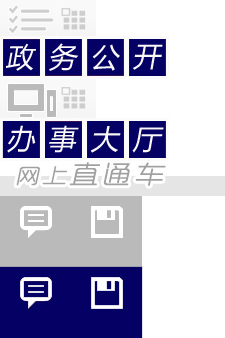
<style>
.page{position:relative;width:225px;height:338px;background:#ffffff}
.page>*{position:absolute;margin:0}
.t1{font:28px "MicrosoftYaHei";letter-spacing:0.08em;color:#faf8f6;font-style:italic}
</style>
<div class="page">
<p class="t1" style="left:6px;top:43px;width:30px;height:28px">政</p>
<p class="t1" style="left:49px;top:43px;width:30px;height:28px">务</p>
<p class="t1" style="left:92px;top:44px;width:28px;height:27px">公</p>
<p class="t1" style="left:133px;top:44px;width:30px;height:26px">开</p>
<p class="t1" style="left:7px;top:125px;width:29px;height:28px">办</p>
<p class="t1" style="left:49px;top:125px;width:30px;height:28px">事</p>
<p class="t1" style="left:90px;top:126px;width:31px;height:27px">大a</p>
<p class="t1" style="left:132px;top:127px;width:32px;height:26px">厅</p>
</div>
